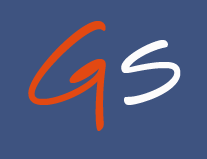
<style>
.page{position:relative;width:207px;height:159px;background:#3e5380}
.page>*{position:absolute;margin:0}
.t1{font:125px "SketchFlowPrint";color:#e24912}
.t2{font:125px "SketchFlowPrint";color:#fdfcfc}
</style>
<div class="page">
<p class="t1" style="left:28px;top:21px;width:153px;height:110px">G<span class="t2">s</span></p>
</div>
